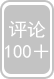
<style>
.page{position:relative;width:54px;height:79px;background:#c3c3c3}
.page>*{position:absolute;margin:0}
.t1{font:18.5px "SimHei";color:#ffffff;text-transform:uppercase}
</style>
<div class="page">
<p class="t1" style="left:5px;top:20px;width:44px;height:39px;text-align:center">评论<br>100＋</p>
</div>
